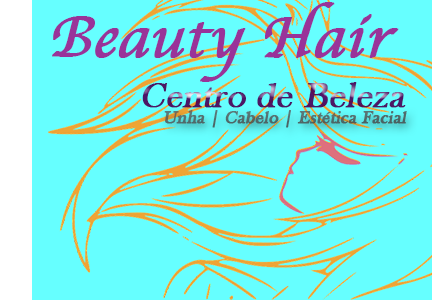
<style>
.page{position:relative;width:432px;height:300px;background:#66ffff}
.page>*{position:absolute;margin:0}
.t1{font:60px "Apple-Chancery";color:#993399;font-weight:bold;font-style:italic}
.t2{font:36px "BaskOldFace";font-weight:bold;font-style:italic}
.t3{font:18px "BaskOldFace";color:#546b6a;font-weight:bold;font-style:italic}
</style>
<div class="page">
<p class="t1" style="left:52px;top:2px;width:347px;height:80px">Beauty Hair</p>
<p class="t2" style="left:142px;top:82px;width:264px;height:26px">Centro de Beleza</p>
<p class="t3" style="left:164px;top:110px;width:243px;height:18px">Unha | Cabelo | Estética Facial</p>
</div>
